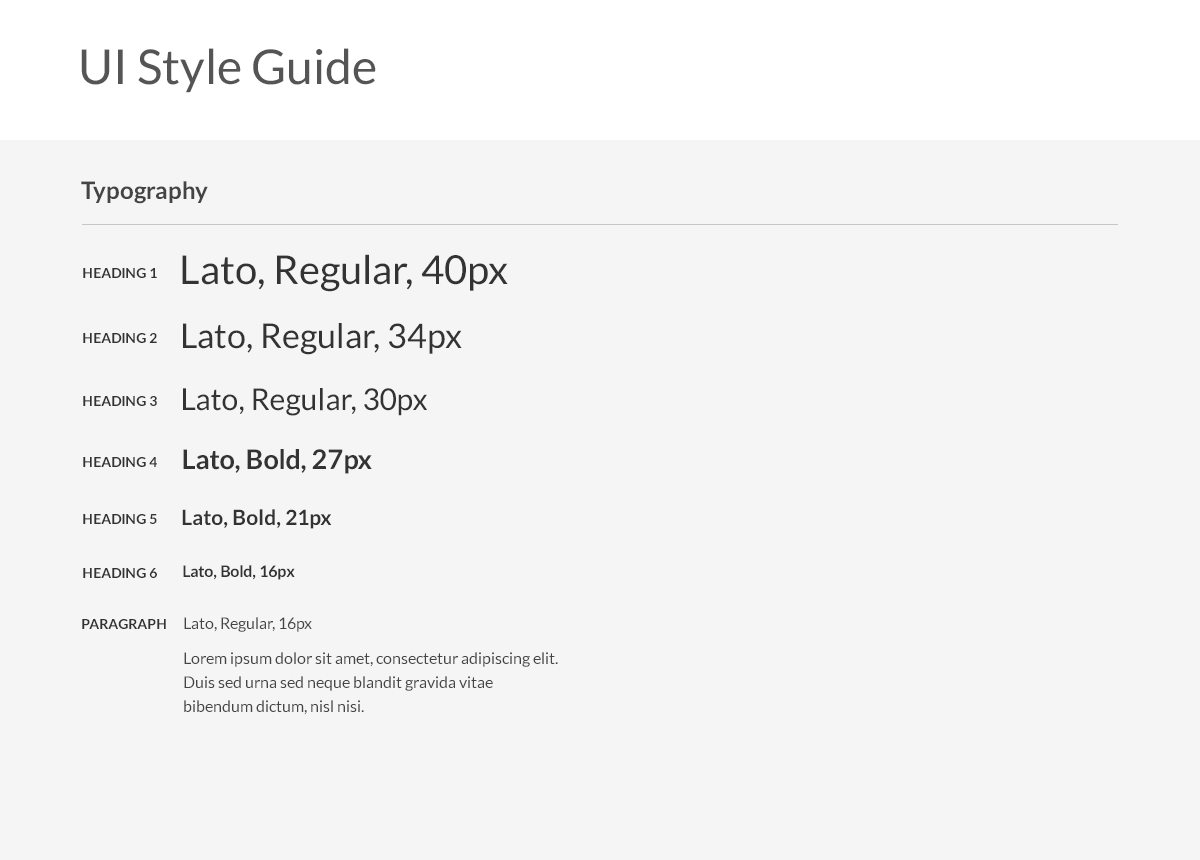
<style>
.page{position:relative;width:1200px;height:860px;background:#f5f5f5}
.page>*{position:absolute;margin:0}
.t1{font:48px "Lato-Regular";color:#555555}
.t2{font:24px "Lato-Bold";color:#444444}
.t3{font:40px "Lato-Regular";color:#333333}
.t4{font:14px "Lato-Bold";color:#333333}
.t5{font:34px "Lato-Regular";color:#333333}
.t6{font:30px "Lato-Regular";color:#333333}
.t7{font:27px "Lato-Bold";color:#333333}
.t8{font:21px "Lato-Bold";color:#333333}
.t9{font:16px "Lato-Bold";color:#333333}
.t10{font:16px "Lato-Regular";color:#454545}
.t11{font:16px/24px "Lato-Regular";color:#454545}
.t12{font:16px/21px "Lato-Regular";color:#454545}
</style>
<div class="page">
<p class="t1" style="left:81px;top:48px;width:295px;height:45px">UI Style Guide</p>
<p class="t2" style="left:81px;top:181px;width:127px;height:23px">Typography</p>
<p class="t3" style="left:182px;top:254px;width:326px;height:38px">Lato, Regular, 40px</p>
<p class="t4" style="left:83px;top:268px;width:74px;height:10px">HEADING 1</p>
<p class="t5" style="left:183px;top:323px;width:279px;height:32px">Lato, Regular, 34px</p>
<p class="t4" style="left:83px;top:333px;width:74px;height:10px">HEADING 2</p>
<p class="t6" style="left:183px;top:388px;width:244px;height:28px">Lato, Regular, 30px</p>
<p class="t4" style="left:83px;top:396px;width:74px;height:10px">HEADING 3</p>
<p class="t7" style="left:183px;top:449px;width:189px;height:25px">Lato, Bold, 27px</p>
<p class="t4" style="left:83px;top:457px;width:74px;height:10px">HEADING 4</p>
<p class="t8" style="left:182px;top:509px;width:150px;height:20px">Lato, Bold, 21px</p>
<p class="t4" style="left:83px;top:514px;width:74px;height:10px">HEADING 5</p>
<p class="t4" style="left:83px;top:568px;width:74px;height:10px">HEADING 6</p>
<p class="t9" style="left:183px;top:565px;width:112px;height:15px">Lato, Bold, 16px</p>
<p class="t10" style="left:184px;top:617px;width:128px;height:15px">Lato, Regular, 16px</p>
<p class="t4" style="left:82px;top:619px;width:84px;height:10px">PARAGRAPH</p>
<p class="t11" style="left:184px;top:652px;width:374px;height:63px">Lorem ipsum dolor sit amet, consectetur adipiscing elit. Duis sed urna sed neque blandit gravida vitae bibendum dictum, nisl nisi<span class="t12">.</span></p>
</div>
